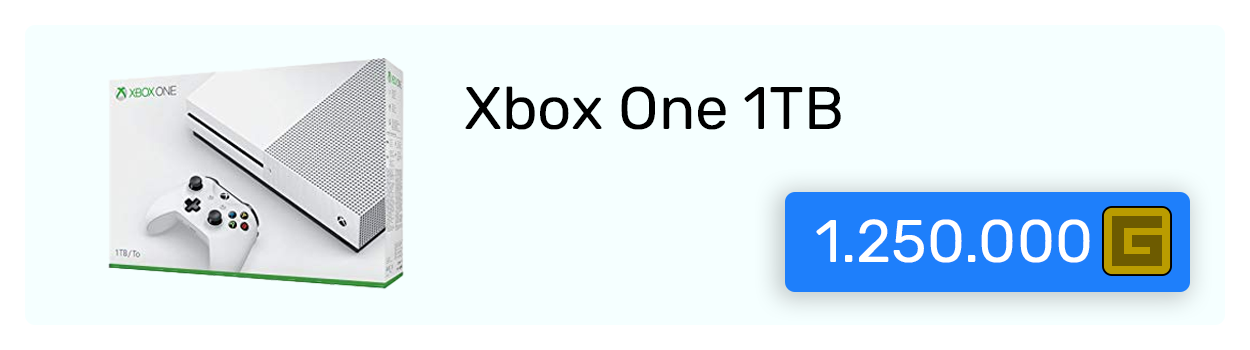
<style>
.page{position:relative;width:1250px;height:350px;background:#f5ffff}
.page>*{position:absolute;margin:0}
.t1{font:60px "Rubik-Regular";color:#000000}
.t2{font:60px "Rubik-Regular";color:#ffffff}
</style>
<div class="page">
<p class="t1" style="left:465px;top:86px;width:376px;height:44px">Xbox One 1TB</p>
<p class="t2" style="left:816px;top:219px;width:274px;height:44px">1.250.000</p>
</div>
